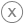
<style>
.page{position:relative;width:25px;height:25px;background:#ffffff}
.page>*{position:absolute;margin:0}
.t1{font:16px "Ayuthaya";letter-spacing:-0.065em;color:#7f7f7f}
</style>
<div class="page">
<p class="t1" style="left:7px;top:8px;width:10px;height:9px">x</p>
</div>
